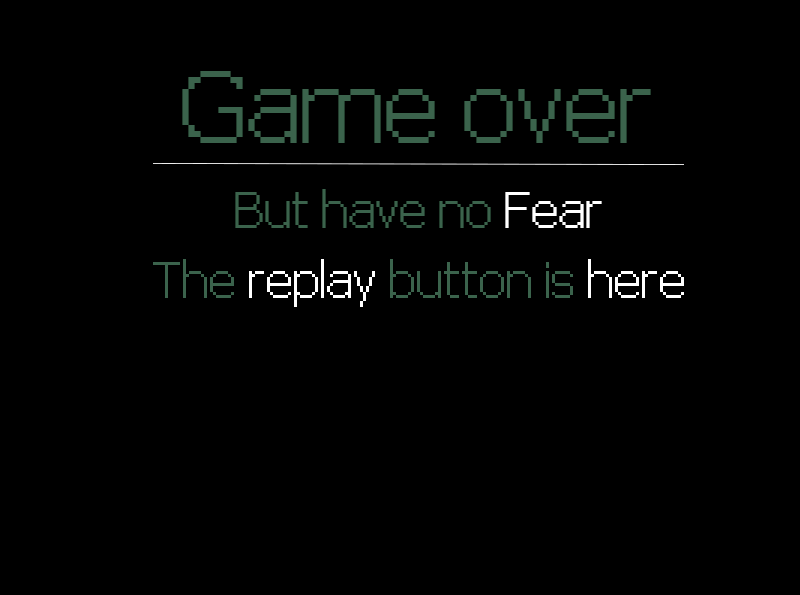
<style>
.page{position:relative;width:800px;height:595px;background:#000000}
.page>*{position:absolute;margin:0}
.t1{font:48px "pix-PixelFJVerdana12pt-Regular";color:#3b634c}
.t2{font:24px/14px "pix-PixelFJVerdana12pt-Regular";color:#3b634c}
.t3{font:24px/14px "pix-PixelFJVerdana12pt-Regular";color:#ffffff}
</style>
<div class="page">
<p class="t1" style="left:182px;top:71px;width:469px;height:72px">Game over</p>
<p class="t2" style="left:153px;top:189px;width:531px;height:118px;text-align:center">But have no <span class="t3">Fear<br></span><br><br><br><br>The <span class="t3">replay </span>button is <span class="t3">here</span></p>
</div>
